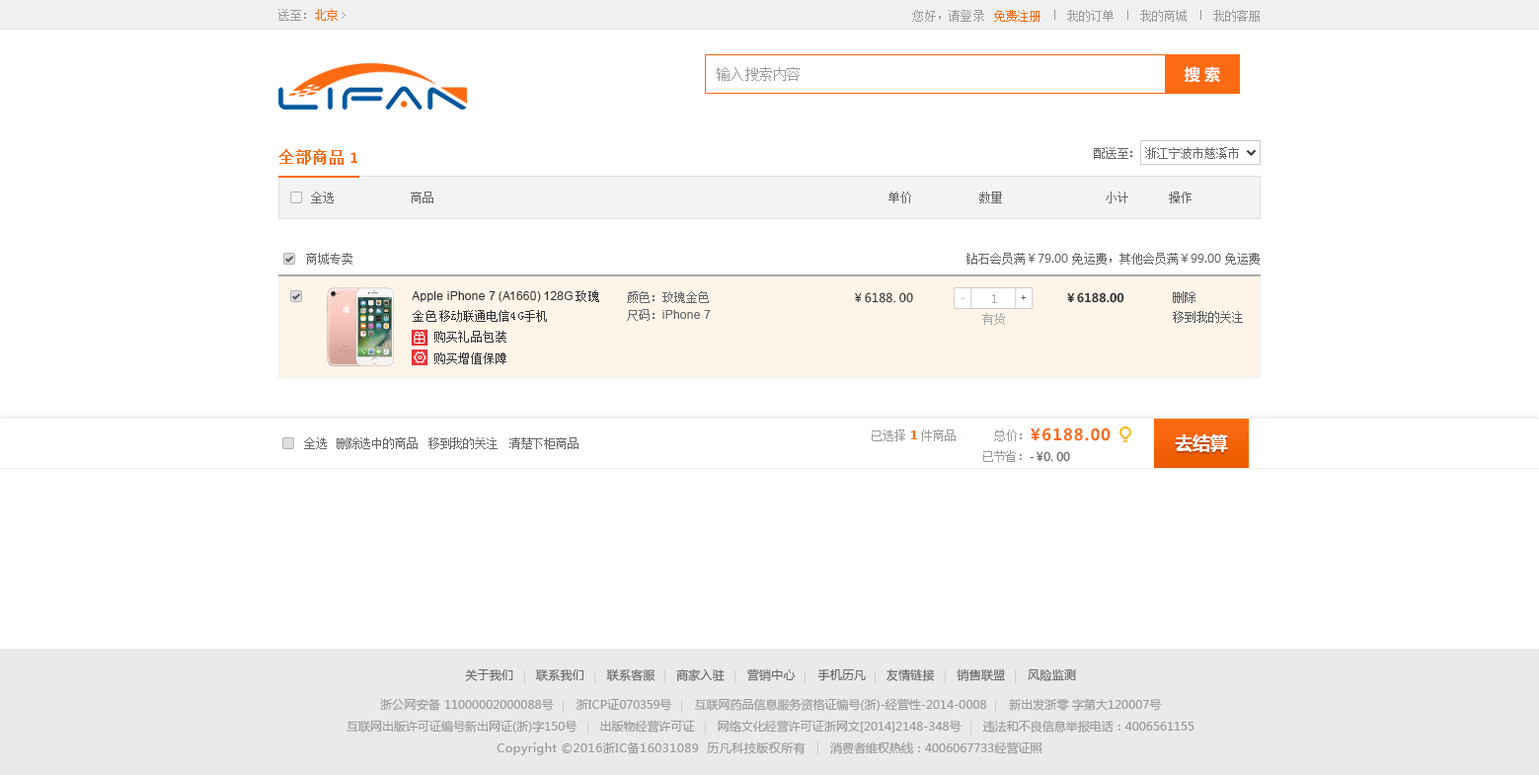
<style>
.page{position:relative;width:1539px;height:775px;background:#ffffff}
.page>*{position:absolute;margin:0}
.t1{font:11.6px "SimSun";letter-spacing:0.02em;color:#999999}
.t2{font:11.6px "SimSun";letter-spacing:0.02em;color:#fc6b12}
.t3{font:12.2px "SimSun";letter-spacing:0.02em;color:#999999}
.t4{font:12.2px "SimSun";letter-spacing:0.02em;color:#fc6b12}
.t5{font:13.7px "SimSun";letter-spacing:0.02em;color:#999999}
.t6{font:15.7px "MicrosoftYaHei-Bold";letter-spacing:0.02em;color:#ffffff}
.t7{font:15.8px "SimSun";color:#fc6b12;font-weight:bold}
.t8{font:11.9px "SimSun";color:#666666}
.t9{font:13.9px "MicrosoftYaHei-Bold";color:#fc6b12}
.t10{font:11.8px "SimSun";color:#666666}
.t11{font:11.8px "MicrosoftYaHei";color:#666666}
.t12{font:11.8px "ArialMT";letter-spacing:0.02em;color:#333333}
.t13{font:11.8px "SimSun";letter-spacing:0.02em;color:#333333}
.t14{font:11.8px/17.6px "SimSun";color:#666666}
.t15{font:11.8px/17.6px "SimSun";letter-spacing:0.02em;color:#666666}
.t16{font:11.8px "MicrosoftYaHei";letter-spacing:0.02em;color:#333333}
.t17{font:11.8px "MicrosoftYaHei-Bold";letter-spacing:0.04em;color:#333333}
.t18{font:11.8px "MicrosoftYaHei-Bold";letter-spacing:0.02em;color:#333333}
.t19{font:11.8px/19.7px "SimSun";color:#555658}
.t20{font:11.8px/19.7px "SimSun";letter-spacing:0.02em;color:#555658}
.t21{font:13.8px "SimSun";letter-spacing:0.02em;color:#aaaaaa}
.t22{font:11.8px "SimSun";color:#333333}
.t23{font:11.8px "ArialMT";letter-spacing:0.02em;color:#666666}
.t24{font:11.8px "SimSun";letter-spacing:0.02em;color:#aaaaaa}
.t25{font:11.8px "SimSun";letter-spacing:0.04em;color:#333333}
.t26{font:11.8px "SimSun";color:#999999}
.t27{font:13.8px "SimSun";color:#fc6b12;font-weight:bold}
.t28{font:15.8px "MicrosoftYaHei-Bold";letter-spacing:0.06em;color:#fc6b12}
.t29{font:15.8px "MicrosoftYaHei-Bold";letter-spacing:0.04em;color:#fc6b12}
.t30{font:17.8px "MicrosoftYaHei-Bold";letter-spacing:-0.02em;color:#ffffff}
.t31{font:11.8px "MicrosoftYaHei";letter-spacing:-0.02em;color:#666666}
.t32{font:11.8px "MicrosoftYaHei";letter-spacing:-0.04em;color:#666666}
.t33{font:11.8px "MicrosoftYaHei";letter-spacing:0.02em;color:#666666}
.t34{font:11.8px "MicrosoftYaHei";color:#999999}
.t35{font:11.8px "MicrosoftYaHei";letter-spacing:0.02em;color:#999999}
.t36{font:11.8px "MicrosoftYaHei";letter-spacing:-0.02em;color:#999999}
.t37{font:11.8px "MicrosoftYaHei";letter-spacing:0.04em;color:#999999}
</style>
<div class="page">
<p class="t1" style="left:278px;top:9px;width:60px;height:12px">送至：<span class="t2">北京</span></p>
<p class="t3" style="left:912px;top:10px;width:72px;height:12px">您好，请登录</p>
<p class="t4" style="left:994px;top:10px;width:46px;height:12px">免费注册</p>
<p class="t3" style="left:1067px;top:10px;width:46px;height:12px">我的订单</p>
<p class="t3" style="left:1140px;top:10px;width:46px;height:12px">我的商城</p>
<p class="t3" style="left:1213px;top:10px;width:47px;height:12px">我的客服</p>
<p class="t5" style="left:717px;top:67px;width:83px;height:14px">输入搜索内容</p>
<p class="t6" style="left:1185px;top:66px;width:35px;height:17px">搜 索</p>
<p class="t7" style="left:278px;top:149px;width:66px;height:16px">全部商品</p>
<p class="t8" style="left:1094px;top:147px;width:38px;height:12px">配送至：</p>
<p class="t8" style="left:1145px;top:147px;width:94px;height:12px">浙江宁波市慈溪市</p>
<p class="t9" style="left:350px;top:152px;width:7px;height:11px">1</p>
<p class="t8" style="left:311px;top:191px;width:23px;height:12px">全选</p>
<p class="t8" style="left:411px;top:191px;width:22px;height:12px">商品</p>
<p class="t8" style="left:888px;top:191px;width:23px;height:12px">单价</p>
<p class="t8" style="left:979px;top:191px;width:23px;height:12px">数量</p>
<p class="t8" style="left:1106px;top:191px;width:22px;height:12px">小计</p>
<p class="t8" style="left:1169px;top:191px;width:22px;height:12px">操作</p>
<p class="t10" style="left:306px;top:253px;width:46px;height:12px">商城专卖</p>
<p class="t10" style="left:966px;top:253px;width:294px;height:12px">钻石会员满<span class="t11">￥79.00 </span>免运费，其他会员满<span class="t11">￥99.00 </span>免运费</p>
<p class="t12" style="left:412px;top:291px;width:161px;height:11px">Apple iPhone 7 (A1660) 128G</p>
<p class="t13" style="left:575px;top:290px;width:24px;height:12px">玫瑰</p>
<p class="t14" style="left:627px;top:291px;width:82px;height:30px"><span class="t15">颜色：</span>玫瑰金色<br><span class="t15">尺码：</span></p>
<p class="t16" style="left:855px;top:292px;width:58px;height:11px">￥6188.00</p>
<p class="t17" style="left:1067px;top:292px;width:57px;height:11px"><span class="t18">￥</span>6188.00</p>
<p class="t19" style="left:1173px;top:291px;width:70px;height:32px"><span class="t20">删除 <br></span>移到我的关注</p>
<p class="t21" style="left:992px;top:294px;width:5px;height:9px">1</p>
<p class="t22" style="left:413px;top:310px;width:134px;height:12px"><span class="t13">金色 </span>移动联通电信4 G手机</p>
<p class="t23" style="left:662px;top:310px;width:49px;height:9px">iPhone 7</p>
<p class="t24" style="left:982px;top:313px;width:23px;height:12px">有货</p>
<p class="t25" style="left:434px;top:331px;width:72px;height:12px">购买礼品包装</p>
<p class="t25" style="left:434px;top:352px;width:72px;height:12px">购买增值保障</p>
<p class="t10" style="left:304px;top:437px;width:23px;height:12px">全选</p>
<p class="t10" style="left:337px;top:437px;width:81px;height:12px">删除选中的商品</p>
<p class="t10" style="left:428px;top:437px;width:69px;height:12px">移到我的关注</p>
<p class="t10" style="left:509px;top:437px;width:69px;height:12px">清楚下柜商品</p>
<p class="t26" style="left:872px;top:429px;width:84px;height:12px">已选择   件商品</p>
<p class="t27" style="left:911px;top:430px;width:6px;height:9px">1</p>
<p class="t26" style="left:994px;top:429px;width:28px;height:12px">总价 ：</p>
<p class="t28" style="left:1031px;top:427px;width:79px;height:14px"><span class="t29">￥</span>6188.00</p>
<p class="t30" style="left:1175px;top:434px;width:53px;height:18px">去结算</p>
<p class="t26" style="left:983px;top:450px;width:39px;height:12px">已节省 ：</p>
<p class="t31" style="left:1030px;top:451px;width:40px;height:11px"><span class="t32">-￥</span>0. 00</p>
<p class="t33" style="left:465px;top:668px;width:611px;height:13px">关于我们      联系我们      联系客服     商家入驻      营销中心      手机历凡     友情链接      销售联盟      风险监测</p>
<p class="t34" style="left:380px;top:698px;width:782px;height:13px"><span class="t35">浙公网安备 </span>11000002000088<span class="t35">号      浙ICP证</span><span class="t36">070359号     </span>互联网药品信息服务资格证编号(<span class="t35">浙</span>)-经营性-2014-0008      新出发<span class="t35">浙</span>零 字第大120007号</p>
<p class="t34" style="left:346px;top:720px;width:848px;height:12px">互联网出版许可证编号新出网证(<span class="t35">浙</span>)字150号       出版物经营许可证       网络文化经营许可证<span class="t35">浙</span>网文[2014]2148-348号       违法和不良信息举报电话：4006561155</p>
<p class="t37" style="left:497px;top:741px;width:545px;height:14px"><span class="t34"><br><br></span>Copyright ©2016浙IC备16031089  历凡科技版权所有<span class="t34">       消费者维权热线：4006067733经营证照</span></p>
</div>
